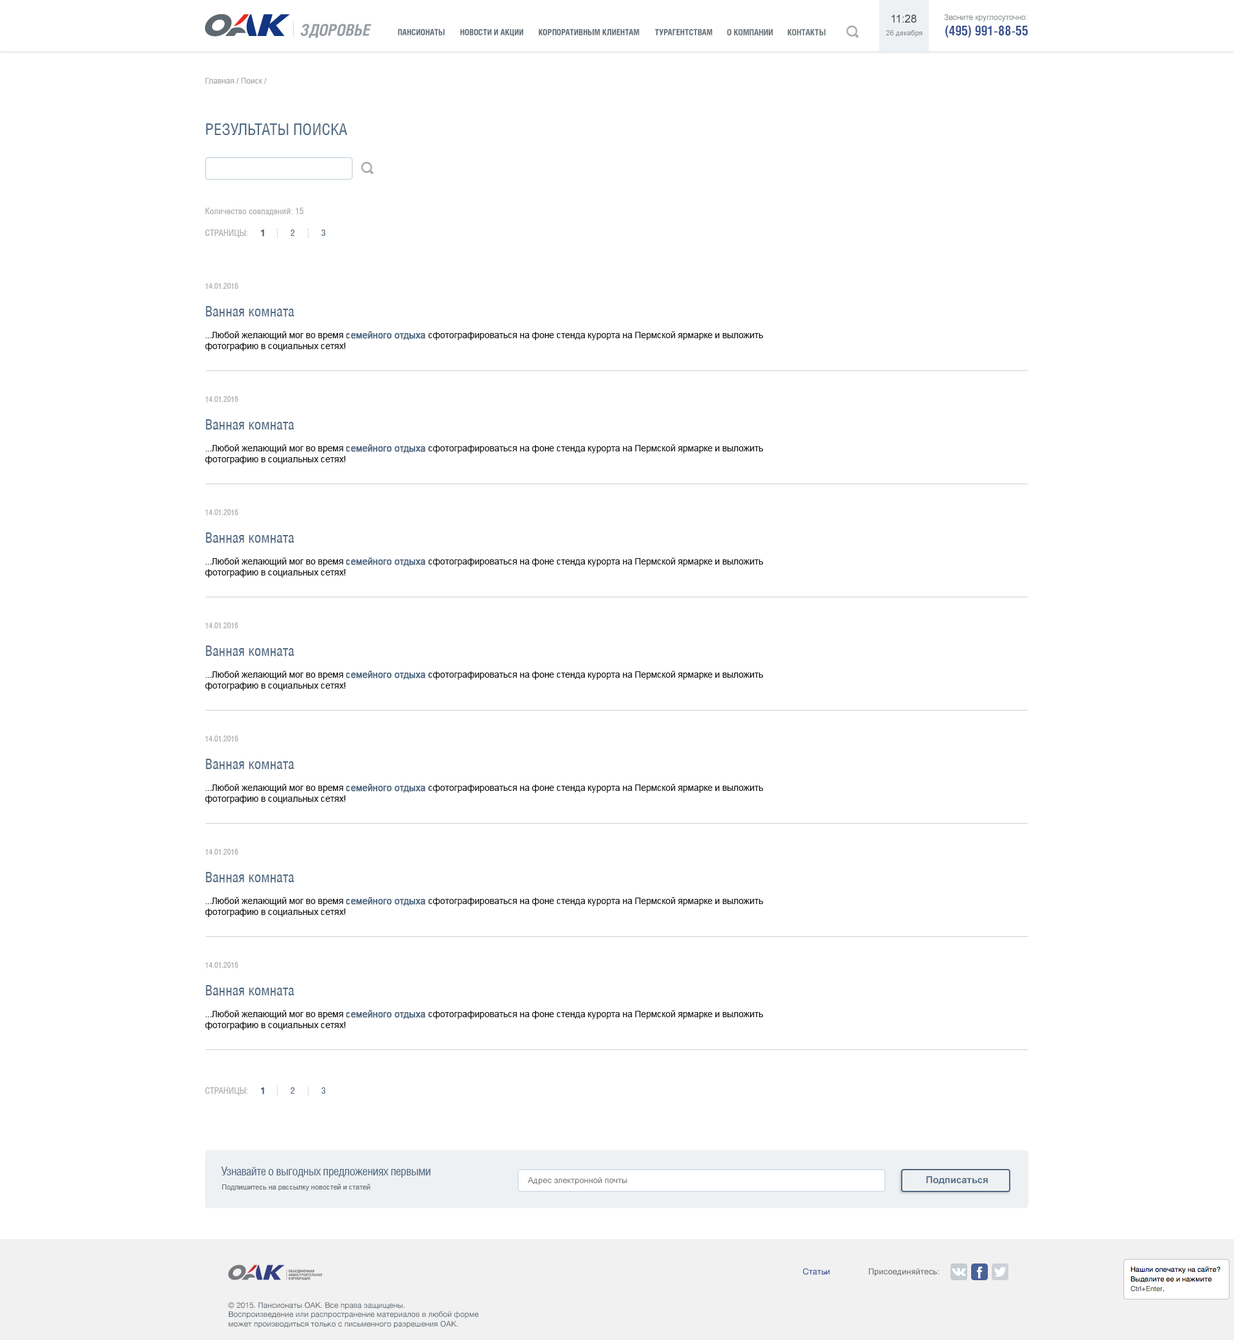
<style>
.page{position:relative;width:1234px;height:1340px;background:#ffffff}
.page>*{position:absolute;margin:0}
.t1{font:10.9px "ArialMT";letter-spacing:-0.005em;color:#3b3c3c}
.t2{font:7.7px "ArialMT";letter-spacing:-0.005em;color:#7c858b}
.t3{font:16.1px "HeliosCond-Bold-Italic";color:#979da3}
.t4{font:8.4px "HeliosCond-Bold";color:#5f6971}
.t5{font:8.7px "HeliosCond-Bold";letter-spacing:-0.005em;color:#697379;text-transform:uppercase}
.t6{font:7.1px "ArialMT";letter-spacing:-0.005em;color:#6a747c}
.t7{font:13.5px "HeliosCondBold";letter-spacing:-0.005em;color:#3d5390;text-transform:uppercase}
.t8{font:7.7px "ArialMT";color:#a9a9a9}
.t9{font:16.1px "HeliosCond";color:#506982;text-transform:uppercase}
.t10{font:9px "HeliosCond";color:#a9a9a9}
.t11{font:9px "HeliosCond";color:#a9a9a9;text-transform:uppercase}
.t12{font:9px "HeliosCondBold";color:#506982;text-transform:uppercase;font-weight:bold}
.t13{font:9px "HeliosCond";color:#506982;text-transform:uppercase}
.t14{font:9px "ArialMT";letter-spacing:-0.01em;color:#151515}
.t15{font:7.7px "HeliosCond";color:#a9a9a9;text-transform:uppercase}
.t16{font:14.2px "HeliosCond";color:#506982}
.t17{font:9px "ArialMT";letter-spacing:-0.01em;color:#506982;font-weight:bold}
.t18{font:12.2px "HeliosCond";letter-spacing:-0.04em;color:#506982}
.t19{font:8.4px "ArialMT";letter-spacing:-0.005em;color:#73777a}
.t20{font:9.6px "Arial-BoldMT";letter-spacing:-0.005em;color:#506982}
.t21{font:7.1px "ArialMT";letter-spacing:-0.01em;color:#6a747c}
.t22{font:8.4px "HelveticaNeue";color:#143682}
.t23{font:8.4px "ArialMT";color:#5f6971}
.t24{font:7.7px "HelveticaNeue";color:#5f6971}
</style>
<div class="page">
<p class="t1" style="left:892px;top:14px;width:25px;height:9px">11:28</p>
<p class="t2" style="left:944px;top:14px;width:83px;height:8px">Звоните круглосуточно:</p>
<p class="t3" style="left:301px;top:24px;width:71px;height:14px">ЗДОРОВЬЕ</p>
<p class="t4" style="left:398px;top:29px;width:47px;height:6px">ПАНСИОНАТЫ</p>
<p class="t4" style="left:460px;top:29px;width:63px;height:8px">НОВОСТИ И АКЦИИ</p>
<p class="t4" style="left:539px;top:29px;width:101px;height:6px">КОРПОРАТИВНЫМ КЛИЕНТАМ</p>
<p class="t4" style="left:655px;top:29px;width:57px;height:6px">ТУРАГЕНТСТВАМ</p>
<p class="t5" style="left:727px;top:29px;width:46px;height:6px">О КОМПАНИИ</p>
<p class="t5" style="left:788px;top:29px;width:38px;height:6px">КОНТАКТЫ</p>
<p class="t6" style="left:886px;top:30px;width:37px;height:7px">26 декабря</p>
<p class="t7" style="left:946px;top:25px;width:82px;height:13px">(495) 991-88-55</p>
<p class="t8" style="left:205px;top:78px;width:62px;height:6px">Главная / Поиск /</p>
<p class="t9" style="left:206px;top:123px;width:142px;height:13px">Результаты поиска</p>
<p class="t10" style="left:205px;top:207px;width:98px;height:8px">Количество совпадений: 15</p>
<p class="t11" style="left:205px;top:229px;width:43px;height:9px">СТРАНИЦЫ:</p>
<p class="t12" style="left:261px;top:230px;width:3px;height:7px">1</p>
<p class="t13" style="left:291px;top:230px;width:4px;height:6px">2</p>
<p class="t13" style="left:321px;top:230px;width:5px;height:6px">3</p>
<p class="t14" style="left:205px;top:283px;width:559px;height:68px"><span class="t15">14.01.2016 <br><br></span><span class="t16">Ванная комната<br></span><br>...Любой желающий мог во время <span class="t17">семейного отдыха </span>сфотографироваться на фоне стенда курорта на Пермской ярмарке и выложить фотографию в социальных сетях!</p>
<p class="t14" style="left:205px;top:396px;width:559px;height:68px"><span class="t15">14.01.2016 <br><br></span><span class="t16">Ванная комната<br></span><br>...Любой желающий мог во время <span class="t17">семейного отдыха </span>сфотографироваться на фоне стенда курорта на Пермской ярмарке и выложить фотографию в социальных сетях!</p>
<p class="t14" style="left:205px;top:509px;width:559px;height:68px"><span class="t15">14.01.2016 <br><br></span><span class="t16">Ванная комната<br></span><br>...Любой желающий мог во время <span class="t17">семейного отдыха </span>сфотографироваться на фоне стенда курорта на Пермской ярмарке и выложить фотографию в социальных сетях!</p>
<p class="t14" style="left:205px;top:622px;width:559px;height:68px"><span class="t15">14.01.2016 <br><br></span><span class="t16">Ванная комната<br></span><br>...Любой желающий мог во время <span class="t17">семейного отдыха </span>сфотографироваться на фоне стенда курорта на Пермской ярмарке и выложить фотографию в социальных сетях!</p>
<p class="t14" style="left:205px;top:735px;width:559px;height:69px"><span class="t15">14.01.2016 <br><br></span><span class="t16">Ванная комната<br></span><br>...Любой желающий мог во время <span class="t17">семейного отдыха </span>сфотографироваться на фоне стенда курорта на Пермской ярмарке и выложить фотографию в социальных сетях!</p>
<p class="t14" style="left:205px;top:849px;width:559px;height:68px"><span class="t15">14.01.2016 <br><br></span><span class="t16">Ванная комната<br></span><br>...Любой желающий мог во время <span class="t17">семейного отдыха </span>сфотографироваться на фоне стенда курорта на Пермской ярмарке и выложить фотографию в социальных сетях!</p>
<p class="t14" style="left:205px;top:962px;width:559px;height:68px"><span class="t15">14.01.2016 <br><br></span><span class="t16">Ванная комната<br></span><br>...Любой желающий мог во время <span class="t17">семейного отдыха </span>сфотографироваться на фоне стенда курорта на Пермской ярмарке и выложить фотографию в социальных сетях!</p>
<p class="t11" style="left:205px;top:1086px;width:43px;height:9px">СТРАНИЦЫ:</p>
<p class="t12" style="left:261px;top:1087px;width:3px;height:7px">1</p>
<p class="t13" style="left:291px;top:1087px;width:4px;height:7px">2</p>
<p class="t13" style="left:321px;top:1087px;width:5px;height:7px">3</p>
<p class="t18" style="left:221px;top:1166px;width:210px;height:12px">Узнавайте о выгодных предложениях первыми</p>
<p class="t19" style="left:528px;top:1176px;width:99px;height:9px">Адрес электронной почты</p>
<p class="t20" style="left:926px;top:1176px;width:62px;height:8px">Подписаться</p>
<p class="t21" style="left:222px;top:1184px;width:148px;height:7px">Подпишитесь на рассылку новостей и статей</p>
<p class="t22" style="left:803px;top:1268px;width:27px;height:7px">Статьи</p>
<p class="t23" style="left:869px;top:1268px;width:70px;height:8px">Присоединяйтесь:</p>
<p class="t24" style="left:228px;top:1302px;width:251px;height:26px">© 2015. Пансионаты ОАК. Все права защищены.<br>Воспроизведение или распространение материалов в любой форме <br>может производиться только с письменного разрешения ОАК.</p>
</div>
